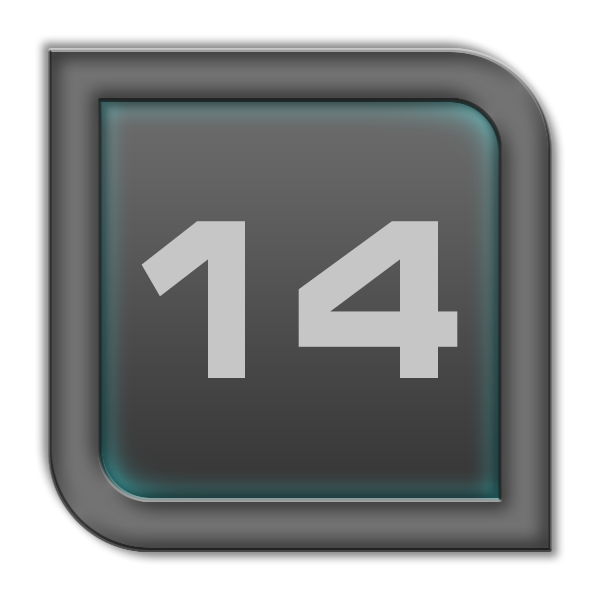
<style>
.page{position:relative;width:600px;height:600px;background:#ffffff}
.page>*{position:absolute;margin:0}
.t1{font:216px "EurostileLTStd-BoldEx2";color:#c6c6c6;scale:0.83 1}
</style>
<div class="page">
<p class="t1" style="left:141px;top:221px;width:317px;height:157px">14</p>
</div>
